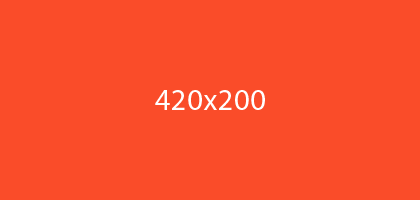
<style>
.page{position:relative;width:420px;height:200px;background:#fa4c29}
.page>*{position:absolute;margin:0}
.t1{font:30px "MyriadPro-Regular";letter-spacing:0.025em;color:#ffffff}
</style>
<div class="page">
<p class="t1" style="left:155px;top:90px;width:110px;height:20px">420x200</p>
</div>
